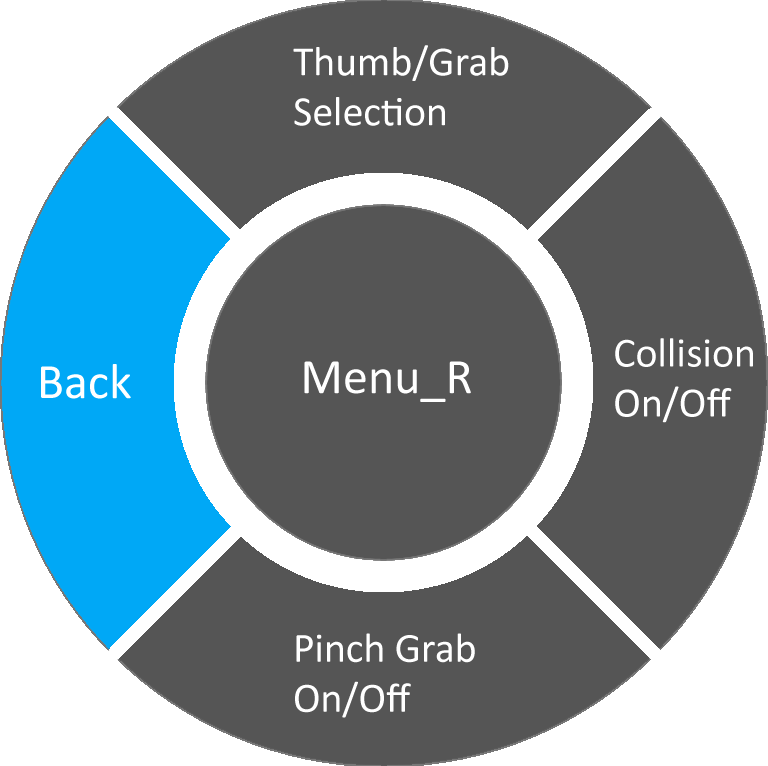
<style>
.page{position:relative;width:768px;height:766px;background:#555555}
.page>*{position:absolute;margin:0}
.t1{font:41.7px "Calibri";color:#ffffff}
.t2{font:50px "Calibri";color:#ffffff}
</style>
<div class="page">
<p class="t1" style="left:293px;top:45px;width:216px;height:81px">Thumb/Grab <br>Selection</p>
<p class="t1" style="left:615px;top:338px;width:138px;height:85px">Collision <br>On/Off</p>
<p class="t2" style="left:41px;top:364px;width:90px;height:35px">Back</p>
<p class="t2" style="left:304px;top:361px;width:167px;height:41px">Menu_R</p>
<p class="t1" style="left:295px;top:633px;width:180px;height:85px">Pinch Grab<br>On/Off</p>
</div>
